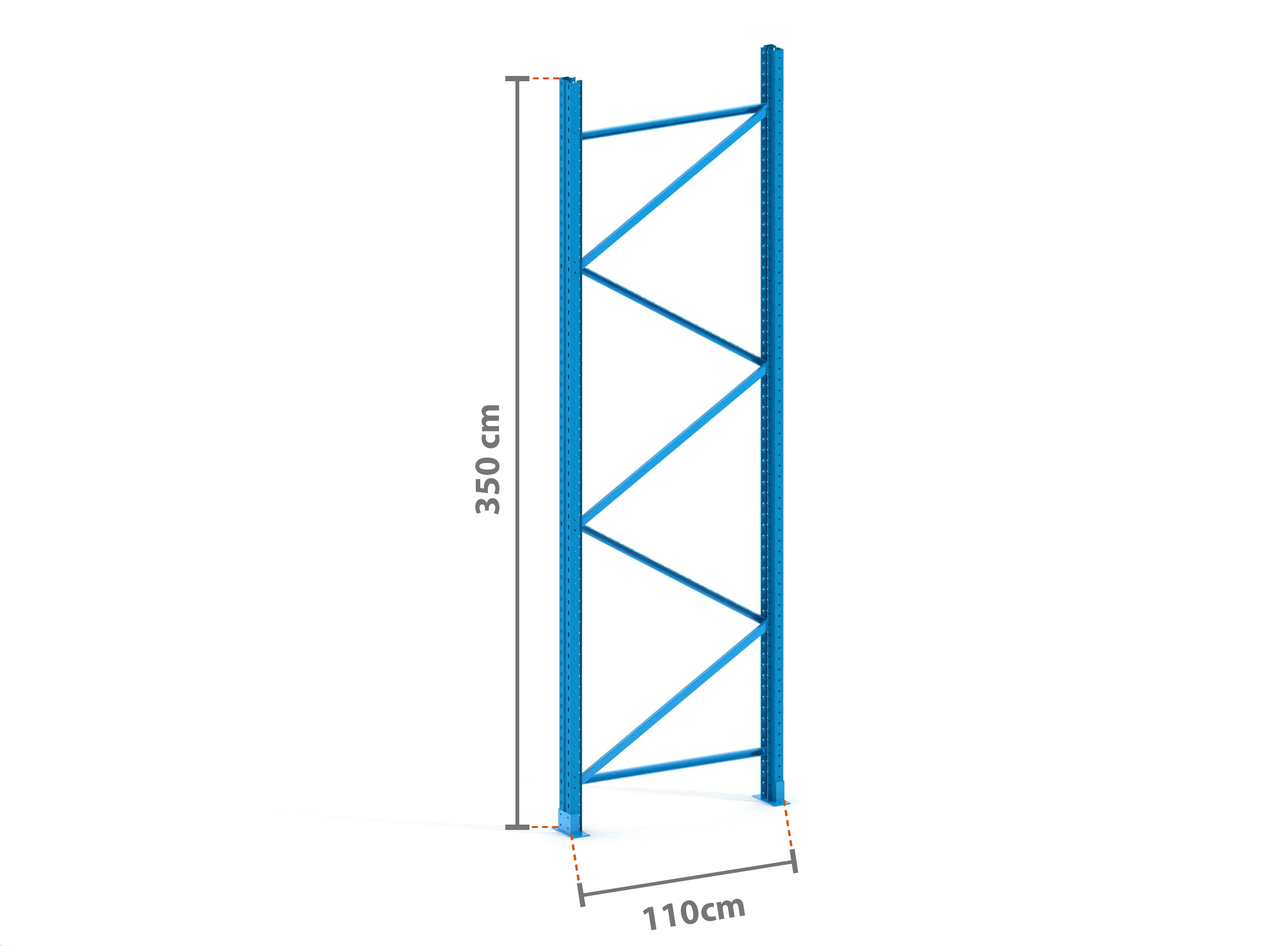
<style>
.page{position:relative;width:1261px;height:946px;background:#ffffff}
.page>*{position:absolute;margin:0}
.t1{font:35.5px "MyriadPro-Bold";color:#757575}
</style>
<div class="page">
<p class="t1" style="left:475px;top:405px;width:24px;height:109px;rotate:-90deg">350 cm</p>
<p class="t1" style="left:643px;top:898px;width:102px;height:32px;rotate:-9deg">110cm</p>
</div>
